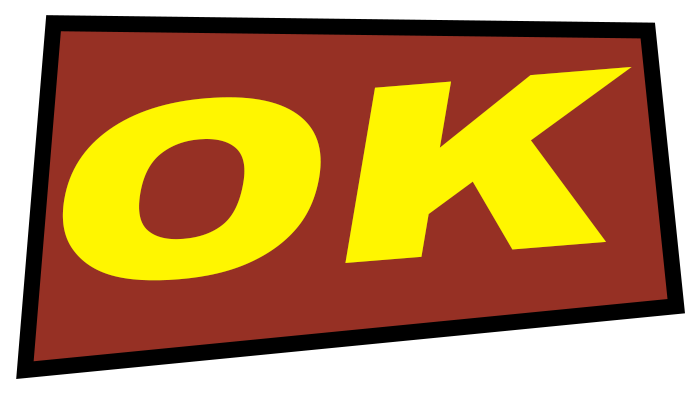
<style>
.page{position:relative;width:700px;height:394px;background:#963024}
.page>*{position:absolute;margin:0}
.t1{font:248.2px "Arial-Black";color:#fff600;scale:1.39 1}
</style>
<div class="page">
<p class="t1" style="left:62px;top:66px;width:570px;height:215px;rotate:-5deg">OK</p>
</div>
